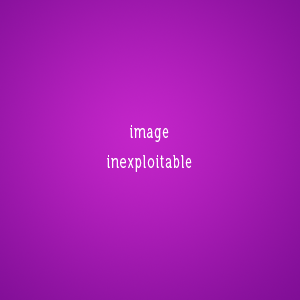
<style>
.page{position:relative;width:300px;height:300px}
.page>*{position:absolute;margin:0}
.t1{font:18.5px/10px "Museo-300";letter-spacing:0.12em;color:#ffffff;scale:0.63 1}
</style>
<div class="page">
<p class="t1" style="left:107px;top:125px;width:85px;height:47px;text-align:center">image<br><br><br>inexploitable</p>
</div>
